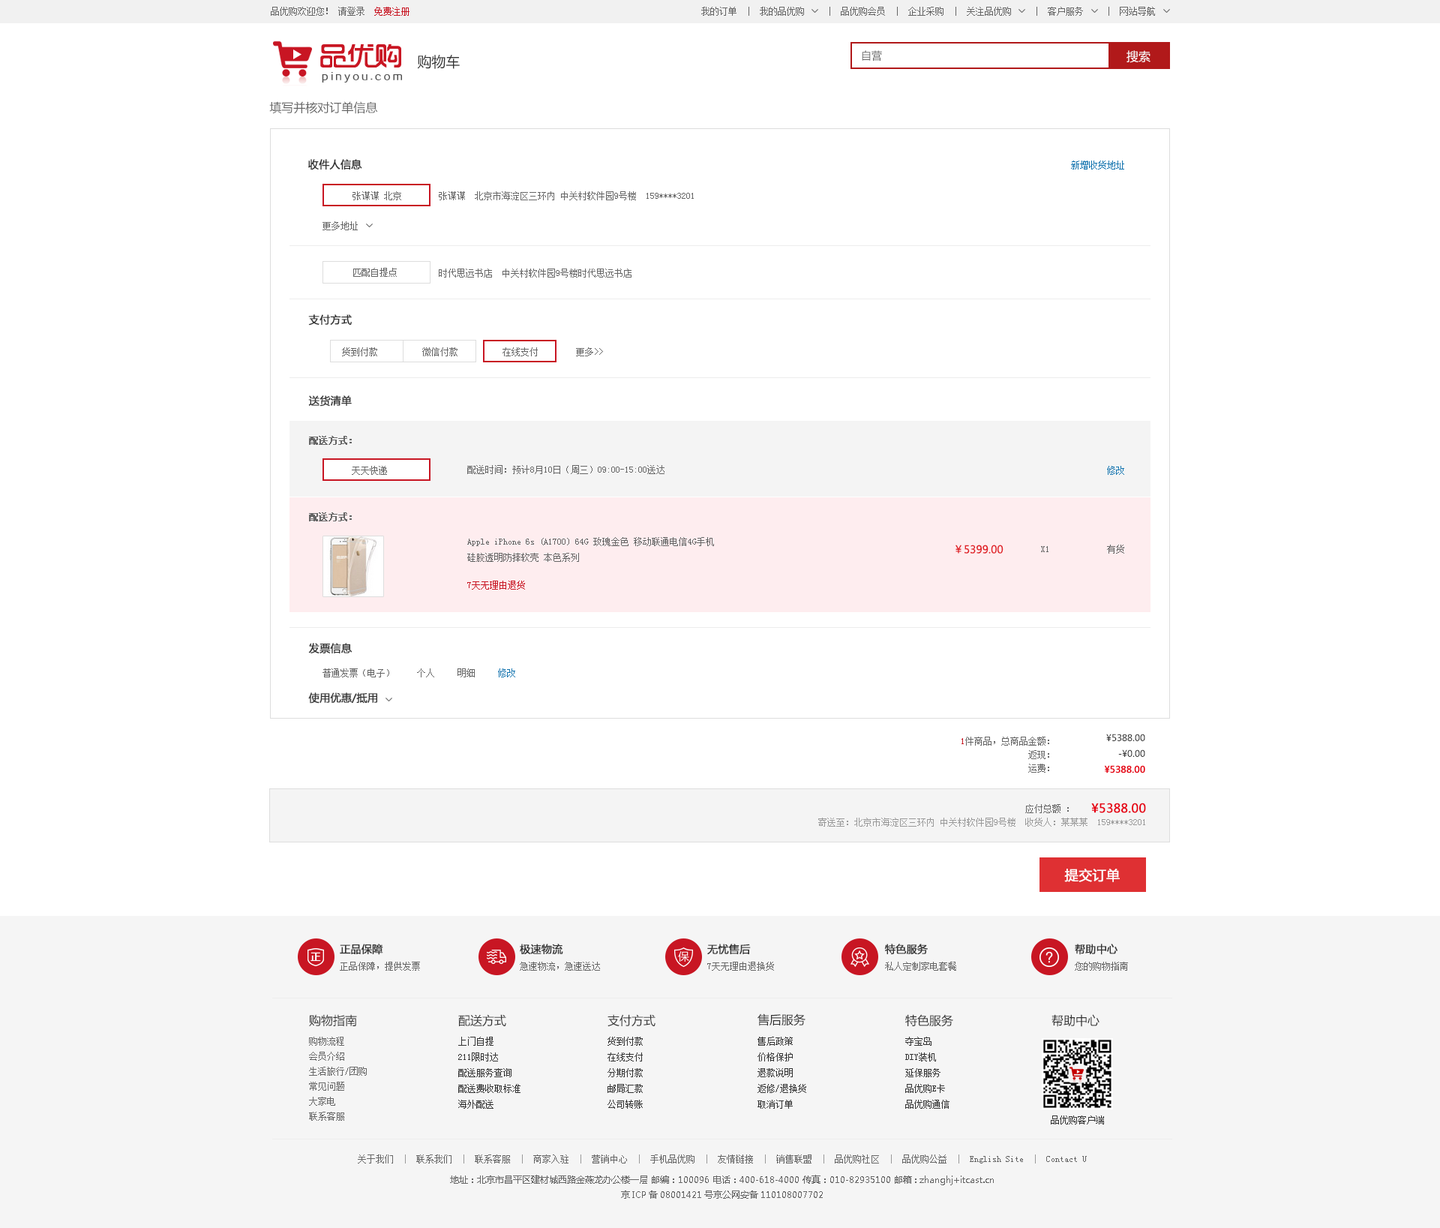
<style>
.page{position:relative;width:1440px;height:1228px;background:#ffffff}
.page>*{position:absolute;margin:0}
.t1{font:9px "SimSun";color:#666666}
.t2{font:9px "SimSun";color:#c81623}
.t3{font:10.5px "MicrosoftYaHei";color:#666666}
.t4{font:12px "MicrosoftYaHei";color:#ffffff}
.t5{font:14.2px "MicrosoftYaHei";color:#333333}
.t6{font:12px "MicrosoftYaHei";color:#666666}
.t7{font:10.5px "MicrosoftYaHei";color:#333333;font-weight:bold}
.t8{font:9px "SimSun";color:#1474af}
.t9{font:9px "SimSun";color:#666666;font-weight:bold}
.t10{font:10.5px "MicrosoftYaHei";color:#e12228}
.t11{font:9px "SimSun";color:#999999}
.t12{font:9px/13.5px "SimSun";color:#666666}
.t13{font:9px/13.5px "SimSun";color:#c81623}
.t14{font:9px/15.8px "MicrosoftYaHei";color:#333333}
.t15{font:9px/15.8px "MicrosoftYaHei";color:#e60012;font-weight:bold}
.t16{font:9px/13.5px "SimSun";color:#999999}
.t17{font:12px "MicrosoftYaHei";color:#e60012;font-weight:bold}
.t18{font:13.5px "MicrosoftYaHei";color:#ffffff;font-weight:bold}
.t19{font:12px "MicrosoftYaHei";color:#333333}
.t20{font:9px/15px "SimSun";color:#666666}
.t21{font:9px/15.7px "SimSun";color:#333333}
.t22{font:9px "SimSun";color:#333333}
.t23{font:9px/15px "MicrosoftYaHei";color:#666666}
.t24{font:9px/21px "SimSun";color:#666666}
.t25{font:9px/21px "SimSun";color:#999999}
.t26{font:9px/9.7px "MicrosoftYaHei";color:#666666}
</style>
<div class="page">
<p class="t1" style="left:271px;top:7px;width:139px;height:9px">品优购欢迎您！ 请登录  <span class="t2">免费注册</span></p>
<p class="t1" style="left:701px;top:7px;width:454px;height:9px">我的订单  |  我的品优购     |  品优购会员  |  企业采购  |  关注品优购     |  客户服务     |  网站导航</p>
<p class="t3" style="left:862px;top:50px;width:20px;height:11px">自营</p>
<p class="t4" style="left:1126px;top:50px;width:24px;height:13px">搜索</p>
<p class="t5" style="left:417px;top:55px;width:43px;height:14px">购物车</p>
<p class="t6" style="left:269px;top:101px;width:109px;height:13px">填写并核对订单信息</p>
<p class="t7" style="left:308px;top:159px;width:54px;height:11px">收件人信息</p>
<p class="t8" style="left:1071px;top:160px;width:53px;height:10px">新增收货地址</p>
<p class="t1" style="left:352px;top:191px;width:49px;height:9px">张谋谋 北京</p>
<p class="t1" style="left:439px;top:191px;width:255px;height:9px">张谋谋  北京市海淀区三环内 中关村软件园9号楼  159****3201</p>
<p class="t1" style="left:322px;top:221px;width:36px;height:9px">更多地址</p>
<p class="t1" style="left:353px;top:268px;width:44px;height:9px">匹配自提点</p>
<p class="t1" style="left:439px;top:268px;width:193px;height:10px">时代思远书店  中关村软件园9号楼时代思远书店</p>
<p class="t7" style="left:308px;top:314px;width:44px;height:12px">支付方式</p>
<p class="t1" style="left:342px;top:347px;width:35px;height:9px">货到付款</p>
<p class="t1" style="left:422px;top:347px;width:36px;height:9px">微信付款</p>
<p class="t1" style="left:502px;top:347px;width:36px;height:9px">在线支付</p>
<p class="t1" style="left:576px;top:347px;width:27px;height:9px">更多&gt;&gt;</p>
<p class="t7" style="left:308px;top:395px;width:44px;height:11px">送货清单</p>
<p class="t9" style="left:309px;top:436px;width:43px;height:9px">配送方式：</p>
<p class="t1" style="left:352px;top:466px;width:35px;height:9px">天天快递</p>
<p class="t1" style="left:467px;top:465px;width:197px;height:9px">配送时间：预计8月10日（周三）09:00-15:00送达</p>
<p class="t8" style="left:1107px;top:466px;width:17px;height:9px">修改</p>
<p class="t9" style="left:309px;top:512px;width:43px;height:9px">配送方式：</p>
<p class="t1" style="left:467px;top:537px;width:247px;height:25px">Apple iPhone 6s (A1700) 64G 玫瑰金色 移动联通电信4G手机<br>硅胶透明防摔软壳 本色系列</p>
<p class="t10" style="left:956px;top:544px;width:48px;height:10px">￥5399.00</p>
<p class="t1" style="left:1107px;top:544px;width:17px;height:10px">有货</p>
<p class="t1" style="left:1041px;top:546px;width:7px;height:6px"><span class="t11">    </span>X1</p>
<p class="t2" style="left:467px;top:580px;width:58px;height:10px">7天无理由退货</p>
<p class="t7" style="left:308px;top:643px;width:44px;height:10px">发票信息</p>
<p class="t1" style="left:322px;top:668px;width:193px;height:9px">普通发票（电子）     个人     明细     <span class="t8">修改</span></p>
<p class="t7" style="left:308px;top:692px;width:69px;height:12px">使用优惠/抵用</p>
<p class="t12" style="left:962px;top:736px;width:87px;height:36px;text-align:right"><span class="t13">1</span>件商品，总商品金额：<br>返现：<br>运费：</p>
<p class="t14" style="left:1104px;top:734px;width:41px;height:39px;text-align:right">¥5388.00<br>-¥0.00<br><span class="t15">¥5388.00</span></p>
<p class="t11" style="left:818px;top:804px;width:327px;height:22px"><span class="t12">                                              应付总额 ： <br></span><span class="t16">寄送至：</span>北京市海淀区三环内 中关村软件园9号楼  收货人：某某某  159****3201</p>
<p class="t17" style="left:1091px;top:802px;width:55px;height:11px">¥5388.00</p>
<p class="t18" style="left:1064px;top:868px;width:56px;height:14px">提交订单</p>
<p class="t7" style="left:340px;top:944px;width:43px;height:11px">正品保障</p>
<p class="t7" style="left:520px;top:944px;width:43px;height:10px">极速物流</p>
<p class="t7" style="left:707px;top:944px;width:44px;height:10px">无忧售后</p>
<p class="t7" style="left:884px;top:944px;width:44px;height:11px">特色服务</p>
<p class="t7" style="left:1075px;top:944px;width:43px;height:11px">帮助中心</p>
<p class="t1" style="left:340px;top:962px;width:80px;height:8px">正品保障，提供发票</p>
<p class="t1" style="left:520px;top:962px;width:80px;height:8px">急速物流，急速送达</p>
<p class="t1" style="left:707px;top:962px;width:67px;height:8px">7天无理由退换货</p>
<p class="t1" style="left:885px;top:962px;width:71px;height:8px">私人定制家电套餐</p>
<p class="t1" style="left:1075px;top:962px;width:53px;height:8px">您的购物指南</p>
<p class="t19" style="left:309px;top:1014px;width:48px;height:12px">购物指南</p>
<p class="t19" style="left:458px;top:1014px;width:48px;height:13px">配送方式</p>
<p class="t19" style="left:608px;top:1014px;width:48px;height:13px">支付方式</p>
<p class="t19" style="left:758px;top:1013px;width:48px;height:13px">售后服务</p>
<p class="t19" style="left:905px;top:1014px;width:48px;height:13px">特色服务</p>
<p class="t19" style="left:1052px;top:1014px;width:48px;height:13px">帮助中心</p>
<p class="t20" style="left:309px;top:1036px;width:58px;height:84px">购物流程<br>会员介绍<br>生活旅行/团购<br>常见问题<br>大家电<br>联系客服</p>
<p class="t21" style="left:458px;top:1036px;width:62px;height:72px">上门自提<br>211限时达<br>配送服务查询<br>配送费收取标准<br>海外配送</p>
<p class="t21" style="left:608px;top:1036px;width:35px;height:72px">货到付款<br>在线支付<br>分期付款<br>邮局汇款<br>公司转账</p>
<p class="t21" style="left:758px;top:1036px;width:48px;height:72px">售后政策<br>价格保护<br>退款说明<br>返修/退换货<br>取消订单</p>
<p class="t21" style="left:905px;top:1036px;width:45px;height:72px">夺宝岛<br>DIY装机<br>延保服务<br>品优购E卡<br>品优购通信</p>
<p class="t22" style="left:1051px;top:1115px;width:53px;height:9px">品优购客户端</p>
<p class="t23" style="left:358px;top:1154px;width:729px;height:44px;text-align:center"><span class="t24">关于我们  </span><span class="t25">|</span><span class="t24">  联系我们  </span><span class="t25">|</span><span class="t24">  联系客服  </span><span class="t25">|</span><span class="t24">  商家入驻  </span><span class="t25">|</span><span class="t24">  营销中心  </span><span class="t25">|</span><span class="t24">  手机品优购  </span><span class="t25">|</span><span class="t24">  友情链接  </span><span class="t25">|</span><span class="t24">  销售联盟  </span><span class="t25">|</span><span class="t24">  品优购社区  </span><span class="t25">|</span><span class="t24">  品优购公益  </span><span class="t25">|</span><span class="t24">  English Site  </span><span class="t25">|</span><span class="t24">  Contact U<br></span>地址：北京市昌平区建材城西路金燕龙办公楼一层 邮编：100096 电话：400-618-4000 传真：010-82935100 邮箱: zhanghj+itcast.cn<br><span class="t26">京ICP备08001421号京公网安备110108007702</span></p>
</div>
